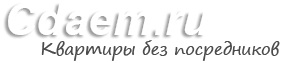
<style>
.page{position:relative;width:282px;height:63px;background:#ffffff}
.page>*{position:absolute;margin:0}
.t1{font:16.7px "SegoePrint";color:#4c4c4c}
</style>
<div class="page">
<p class="t1" style="left:41px;top:40px;width:239px;height:21px">Квартиры без посредников</p>
</div>
